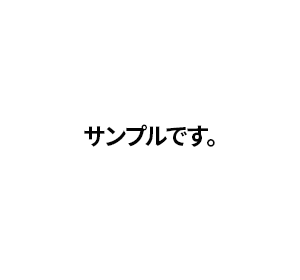
<style>
.page{position:relative;width:300px;height:280px;background:#ffffff}
.page>*{position:absolute;margin:0}
.t1{font:24px "SourceHanSansJP-Bold";letter-spacing:-0.14em;color:#030303}
</style>
<div class="page">
<p class="t1" style="left:84px;top:124px;width:131px;height:23px">サンプルです。</p>
</div>
